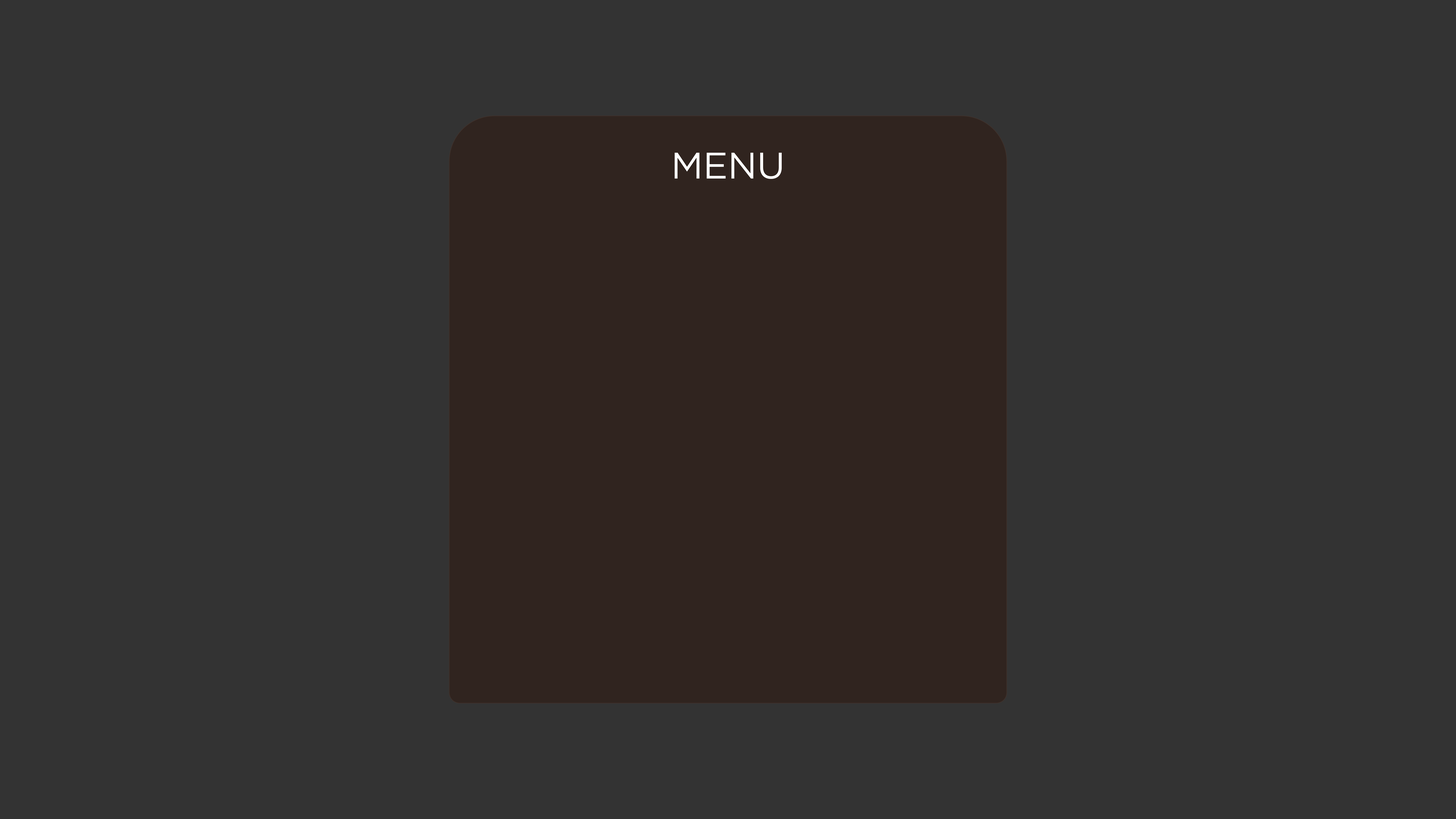
<style>
.page{position:relative;width:1456px;height:819px;background:#333333}
.page>*{position:absolute;margin:0}
.t1{font:36.9px "Gotham-Book";color:#ffffff}
</style>
<div class="page">
<p class="t1" style="left:675px;top:153px;width:107px;height:26px">MENU</p>
</div>
